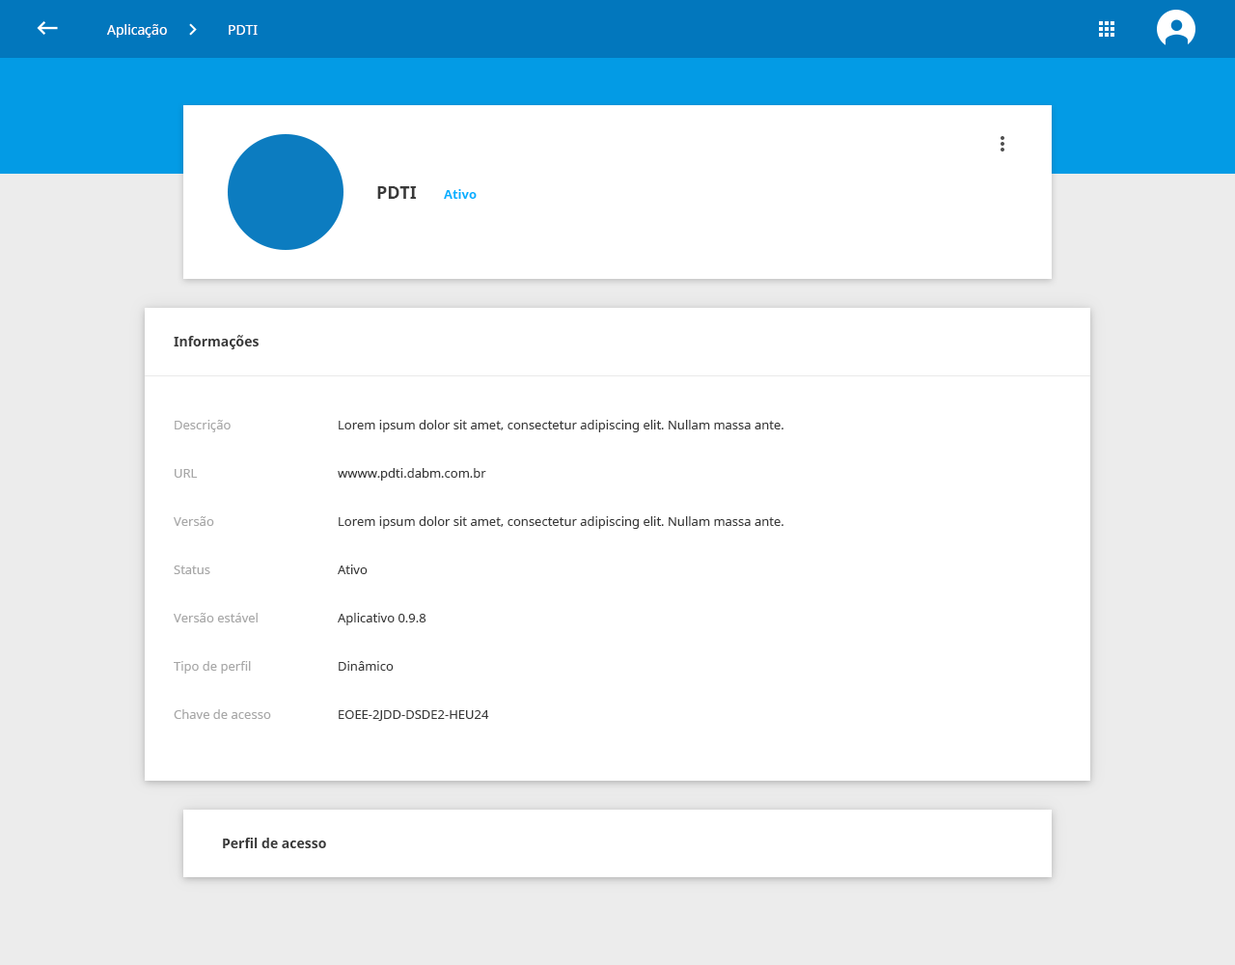
<style>
.page{position:relative;width:1235px;height:965px;background:#ffffff}
.page>*{position:absolute;margin:0}
.t1{font:13.5px "NotoSans";color:#ffffff}
.t2{font:17.4px "NotoSans-Bold";color:#393939}
.t3{font:12.5px "NotoSans-Bold";color:#00b0ff}
.t4{font:13.5px "NotoSans-Bold";color:#393939}
.t5{font:12.5px "NotoSans";color:#a7a7a7}
.t6{font:12.5px "NotoSans";color:#393939}
</style>
<div class="page">
<p class="t1" style="left:107px;top:24px;width:60px;height:14px">Aplicação</p>
<p class="t1" style="left:229px;top:25px;width:29px;height:10px">PDTI</p>
<p class="t2" style="left:377px;top:186px;width:40px;height:13px">PDTI</p>
<p class="t3" style="left:444px;top:189px;width:33px;height:10px">Ativo</p>
<p class="t4" style="left:174px;top:335px;width:85px;height:14px">Informações</p>
<p class="t5" style="left:175px;top:420px;width:56px;height:12px">Descrição</p>
<p class="t6" style="left:339px;top:420px;width:445px;height:12px">Lorem ipsum dolor sit amet, consectetur adipiscing elit. Nullam massa ante.</p>
<p class="t5" style="left:175px;top:469px;width:23px;height:9px">URL</p>
<p class="t6" style="left:338px;top:468px;width:148px;height:13px">wwww.pdti.dabm.com.br</p>
<p class="t5" style="left:174px;top:516px;width:40px;height:10px">Versão</p>
<p class="t6" style="left:339px;top:516px;width:445px;height:13px">Lorem ipsum dolor sit amet, consectetur adipiscing elit. Nullam massa ante.</p>
<p class="t5" style="left:174px;top:566px;width:36px;height:8px">Status</p>
<p class="t6" style="left:338px;top:565px;width:30px;height:9px">Ativo</p>
<p class="t5" style="left:174px;top:613px;width:84px;height:10px">Versão estável</p>
<p class="t6" style="left:338px;top:613px;width:89px;height:12px">Aplicativo 0.9.8</p>
<p class="t5" style="left:174px;top:661px;width:77px;height:13px">Tipo de perfil</p>
<p class="t6" style="left:339px;top:661px;width:55px;height:10px">Dinâmico</p>
<p class="t5" style="left:174px;top:709px;width:97px;height:10px">Chave de acesso</p>
<p class="t6" style="left:339px;top:710px;width:150px;height:11px">EOEE-2JDD-DSDE2-HEU24</p>
<p class="t4" style="left:223px;top:838px;width:103px;height:10px">Perfil de acesso</p>
</div>
